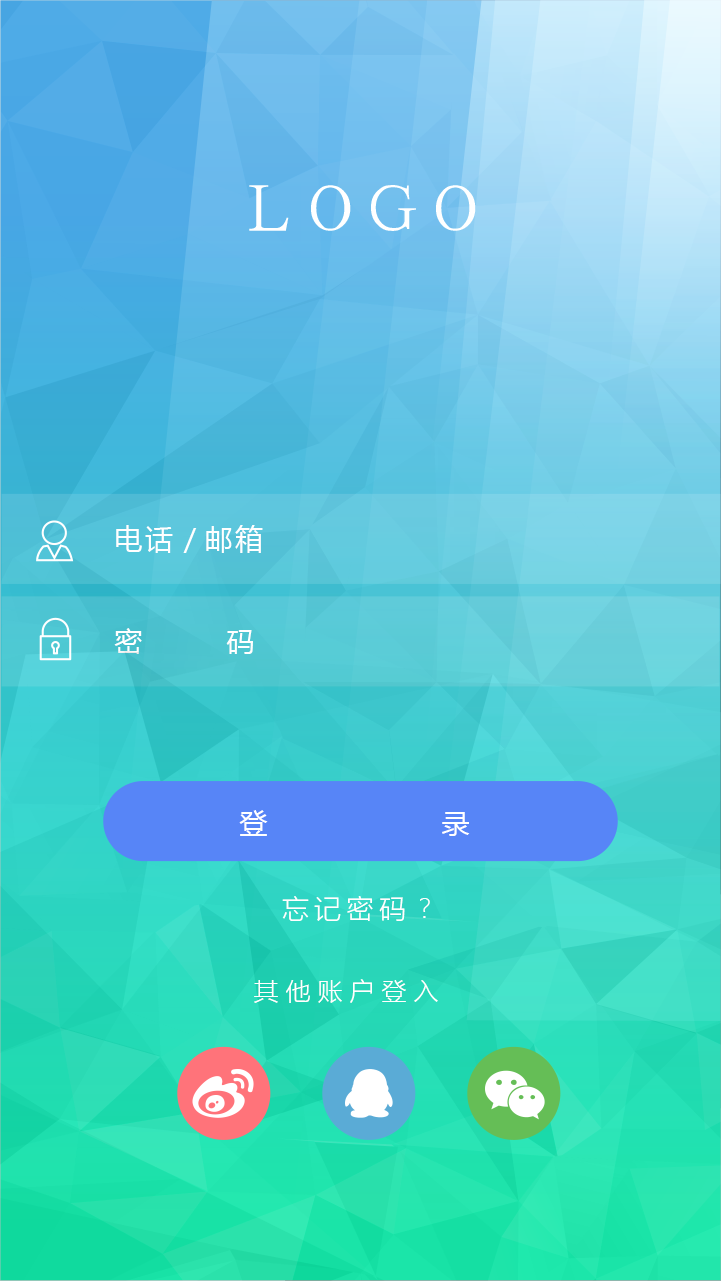
<style>
.page{position:relative;width:721px;height:1281px}
.page>*{position:absolute;margin:0}
.t1{font:69.6px "AdobeSongStd-Light";letter-spacing:-0.1em;color:#ffffff}
.t2{font:28px/102.4px "MicrosoftYaHei";letter-spacing:0.1em;color:#ffffff}
.t3{font:28px/102.4px "MicrosoftYaHei";color:#ffffff}
.t4{font:28px "MicrosoftYaHei";color:#ffffff}
.t5{font:27px "MicrosoftYaHeiLight";letter-spacing:0.2em;color:#ffffff}
.t6{font:25px "MicrosoftYaHeiLight";letter-spacing:0.28em;color:#ffffff}
</style>
<div class="page">
<p class="t1" style="left:249px;top:185px;width:227px;height:46px">ＬＯＧＯ</p>
<p class="t2" style="left:114px;top:525px;width:149px;height:129px">电话／邮箱<br><span class="t3">密　　　码</span></p>
<p class="t4" style="left:239px;top:810px;width:231px;height:26px">登                     录</p>
<p class="t5" style="left:282px;top:896px;width:148px;height:25px">忘记密码？</p>
<p class="t6" style="left:254px;top:979px;width:184px;height:24px">其他账户登入</p>
</div>
